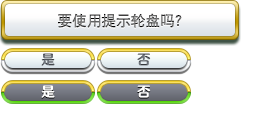
<style>
.page{position:relative;width:256px;height:128px;background:#ffffff}
.page>*{position:absolute;margin:0}
.t1{font:14.7px "DFPHeiW5-GB"}
.t2{font:13.3px "FZFW-QingYinTiS-B--GB1-0";color:#62666d}
.t3{font:13.3px "FZFW-QingYinTiS-B--GB1-0";color:#6e737b}
.t4{font:13.3px "FZFW-QingYinTiS-B--GB1-0";color:#ffffff}
</style>
<div class="page">
<p class="t1" style="left:58px;top:13px;width:124px;height:15px">要使用提示轮盘吗？</p>
<p class="t2" style="left:41px;top:53px;width:14px;height:13px">是</p>
<p class="t3" style="left:137px;top:53px;width:14px;height:13px">否</p>
<p class="t4" style="left:41px;top:85px;width:14px;height:13px">是</p>
<p class="t4" style="left:137px;top:85px;width:14px;height:13px">否</p>
</div>
